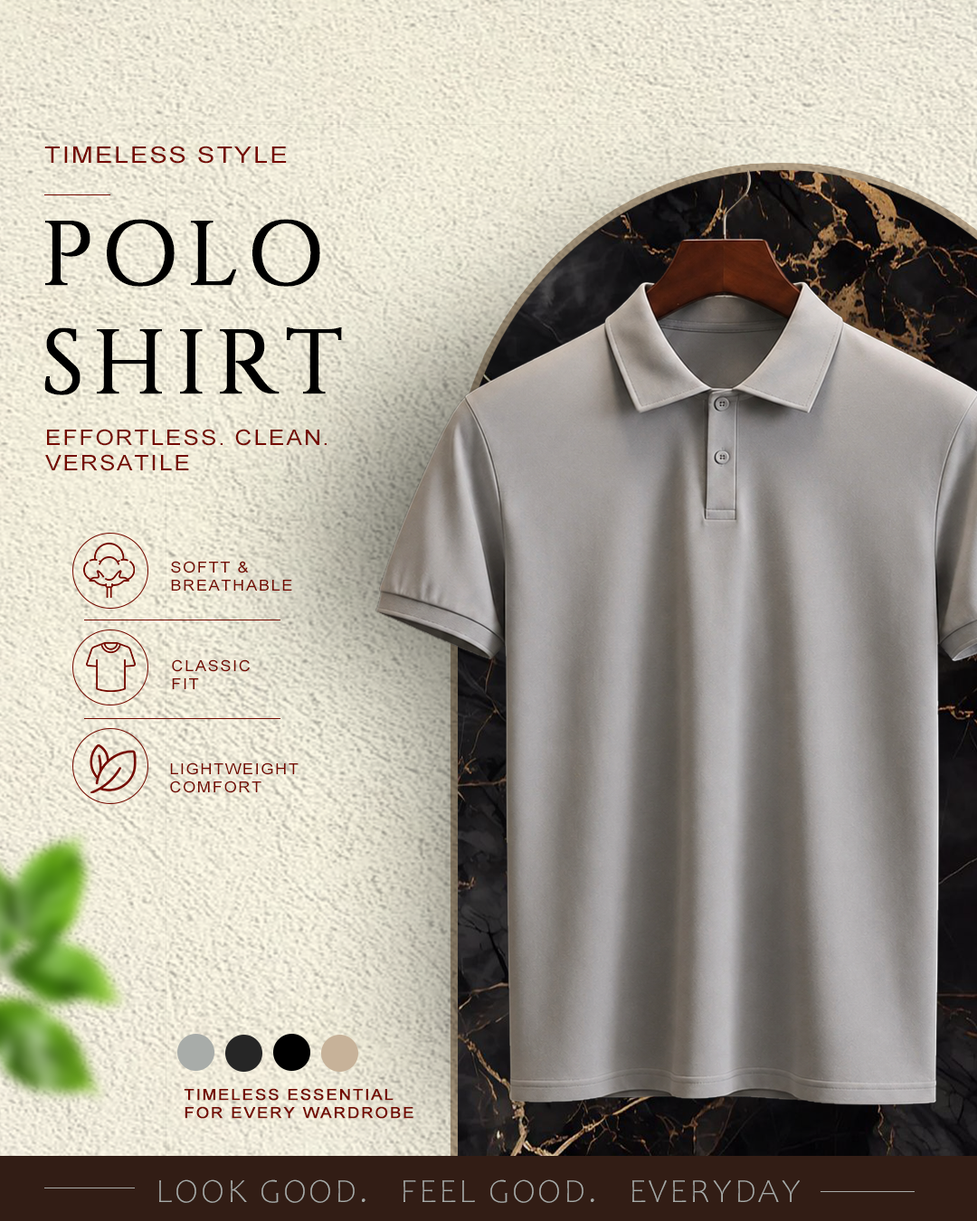
<style>
.page{position:relative;width:977px;height:1221px}
.page>*{position:absolute;margin:0}
.t1{font:22.6px "ArialMT";letter-spacing:0.075em;color:#740a00;scale:1.14 1}
.t2{font:90.4px "Cinzel-Regular";letter-spacing:0.075em;color:#000000;font-weight:bold}
.t3{font:21.2px "ArialMT";letter-spacing:0.075em;color:#740a00;scale:1.12 1}
.t4{font:15.1px "ArialMT";letter-spacing:0.075em;color:#740a00;scale:1.12 1}
.t5{font:15.1px "ArialMT";letter-spacing:0.075em;color:#740a00;font-weight:bold;scale:1.12 1}
.t6{font:33.9px "Candara-Light";letter-spacing:0.075em;color:#a8aca9}
</style>
<div class="page">
<p class="t1" style="left:44px;top:146px;width:243px;height:18px">TIMELESS STYLE</p>
<p class="t2" style="left:44px;top:219px;width:298px;height:176px">POLO<br>SHIRT</p>
<p class="t3" style="left:45px;top:429px;width:281px;height:42px">EFFORTLESS. CLEAN.<br>VERSATILE</p>
<p class="t4" style="left:171px;top:561px;width:121px;height:30px">SOFTT &amp;<br>BREATHABLE</p>
<p class="t4" style="left:172px;top:659px;width:78px;height:30px">CLASSIC<br>FIT</p>
<p class="t4" style="left:170px;top:762px;width:128px;height:31px">LIGHTWEIGHT<br>COMFORT</p>
<p class="t5" style="left:184px;top:1088px;width:229px;height:31px">TIMELESS ESSENTIAL<br>FOR EVERY WARDROBE</p>
<p class="t6" style="left:159px;top:1179px;width:640px;height:24px">LOOK GOOD.   FEEL GOOD.   EVERYDAY</p>
</div>
